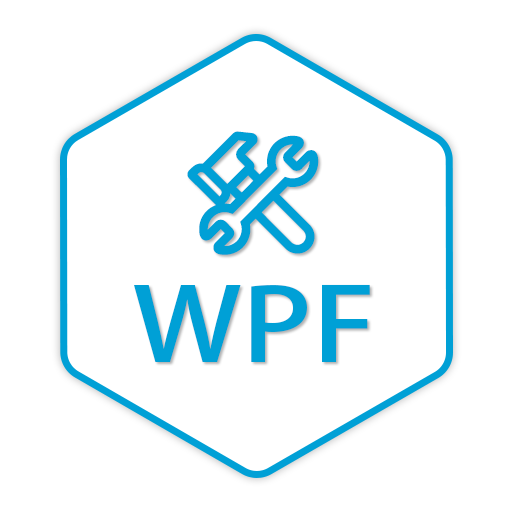
<style>
.page{position:relative;width:512px;height:512px;background:#ffffff}
.page>*{position:absolute;margin:0}
.t1{font:100px "AdobeHeitiStd-Regular";color:#00a0d6;scale:1.2 1}
</style>
<div class="page">
<p class="t1" style="left:134px;top:284px;width:236px;height:78px">WPF</p>
</div>
